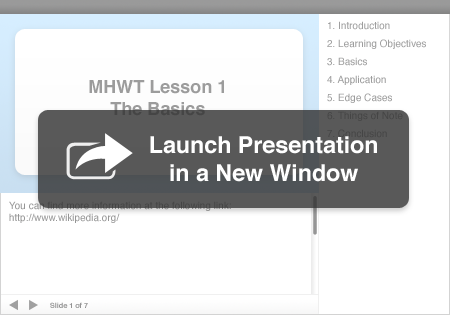
<style>
.page{position:relative;width:450px;height:315px;background:#ffffff}
.page>*{position:absolute;margin:0}
.t1{font:18px "Helvetica-Bold";color:#9c9c9c}
.t2{font:23.2px "Helvetica-Bold";color:#ffffff}
.t3{font:10px "Helvetica"}
.t4{font:7.2px "Helvetica-Bold";color:#929292}
</style>
<div class="page">
<p class="t1" style="left:89px;top:80px;width:135px;height:36px;text-align:center">MHWT Lesson 1<br>The Basics</p>
<p class="t2" style="left:150px;top:136px;width:227px;height:46px;text-align:center">Launch Presentation<br>in a New Window</p>
<p class="t3" style="left:9px;top:201px;width:222px;height:22px">You can find more information at the following link:<br>http://www.wikipedia.org/</p>
<p class="t4" style="left:50px;top:302px;width:38px;height:6px">Slide 1 of 7</p>
</div>
